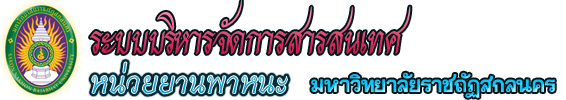
<style>
.page{position:relative;width:566px;height:100px;background:#ffffff}
.page>*{position:absolute;margin:0}
.t1{font:55.7px "THCharmofAU";letter-spacing:-0.05em}
.t2{font:35.1px "SPNormal";color:#0ec3f6}
</style>
<div class="page">
<p class="t1" style="left:90px;top:0px;width:321px;height:54px">ระบบบริหารจัดการสารสนเทศ</p>
<p class="t2" style="left:311px;top:72px;width:244px;height:26px">มหาวิทยาลัยราชถัฏสกลนคร</p>
</div>
